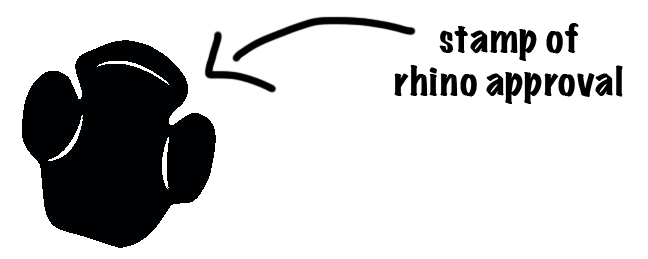
<style>
.page{position:relative;width:648px;height:259px;background:#ffffff}
.page>*{position:absolute;margin:0}
.t1{font:36px "MarkerFelt-Wide";color:#000000}
</style>
<div class="page">
<p class="t1" style="left:394px;top:23px;width:229px;height:81px;text-align:center">stamp of <br>rhino approval</p>
</div>
